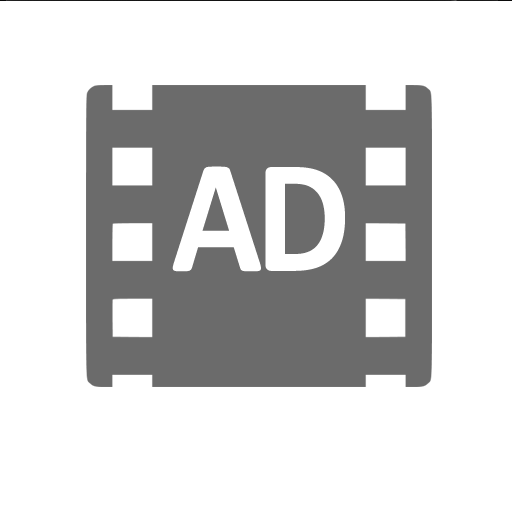
<style>
.page{position:relative;width:512px;height:512px;background:#ffffff}
.page>*{position:absolute;margin:0}
.t1{font:163.9px "Calibri-Bold";letter-spacing:-0.05em;color:#ffffff;scale:0.92 1}
</style>
<div class="page">
<p class="t1" style="left:172px;top:165px;width:173px;height:106px">AD</p>
</div>
